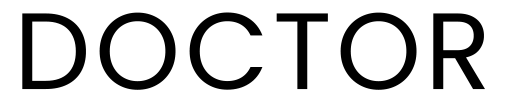
<style>
.page{position:relative;width:507px;height:110px;background:#ffffff}
.page>*{position:absolute;margin:0}
.t1{font:108.3px "Poppins-Regular";letter-spacing:0.04em;color:#000000}
</style>
<div class="page">
<p class="t1" style="left:22px;top:12px;width:463px;height:78px">DOCTOR</p>
</div>
